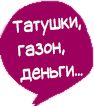
<style>
.page{position:relative;width:94px;height:106px;background:#9e005d}
.page>*{position:absolute;margin:0}
.t1{font:20px "SuplexmentaryComicNC";color:#ffffff;scale:0.8 1}
</style>
<div class="page">
<p class="t1" style="left:12px;top:16px;width:71px;height:67px;rotate:-5deg">Татушки, <br> газон,<br> деньги...</p>
</div>
